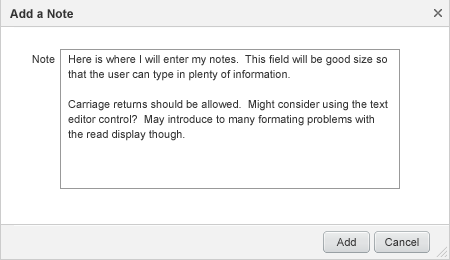
<style>
.page{position:relative;width:450px;height:260px;background:#ffffff}
.page>*{position:absolute;margin:0}
.t1{font:12px "Arial-BoldMT";color:#333333}
.t2{font:11px "ArialMT";color:#333333}
.t3{font:11px/15px "ArialMT";color:#333333}
.t4{font:11px "ArialMT";letter-spacing:0.005em;color:#333333}
</style>
<div class="page">
<p class="t1" style="left:10px;top:9px;width:63px;height:9px">Add a Note</p>
<p class="t2" style="left:32px;top:55px;width:23px;height:8px">Note</p>
<p class="t3" style="left:68px;top:55px;width:320px;height:86px">Here is where I will enter my notes.  This field will be good size so <br>that the user can type in plenty of information.  <br><br>Carriage returns should be allowed.  Might consider using the text <br>editor control?  May introduce to many formating problems with <br>the read display though.</p>
<p class="t4" style="left:336px;top:238px;width:20px;height:8px">Add</p>
<p class="t4" style="left:385px;top:238px;width:34px;height:8px">Cancel</p>
</div>
